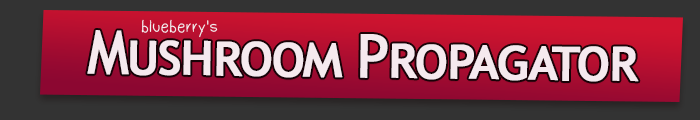
<style>
.page{position:relative;width:700px;height:120px;background:#333333}
.page>*{position:absolute;margin:0}
.t1{font:60px "TrebuchetMS";letter-spacing:-0.05em;color:#f5e9ee;font-variant:small-caps;font-weight:bold;scale:0.95 1}
.t2{font:18px "Dudu_Calligraphy";color:#f2f2f2}
</style>
<div class="page">
<p class="t1" style="left:87px;top:30px;width:552px;height:52px;rotate:1deg">Mushroom Propagator</p>
<p class="t2" style="left:141px;top:19px;width:77px;height:19px">blueberry's</p>
</div>
